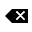
<style>
.page{position:relative;width:32px;height:32px;background:#ffffff}
.page>*{position:absolute;margin:0}
.t1{font:18.7px "MicrosoftYaHei";letter-spacing:0.12em;color:#ffffff}
</style>
<div class="page">
<p class="t1" style="left:16px;top:11px;width:9px;height:9px">×</p>
</div>
